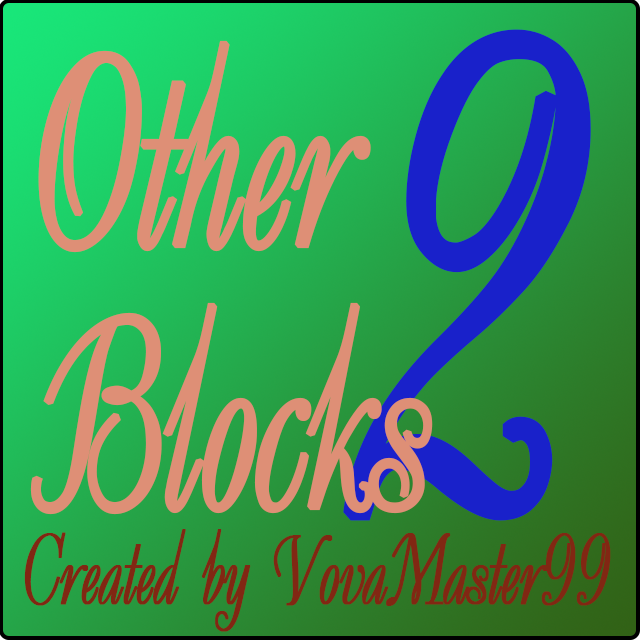
<style>
.page{position:relative;width:640px;height:640px}
.page>*{position:absolute;margin:0}
.t1{font:666.7px "DecorCyrillic";letter-spacing:-0.025em;color:#1921ca;font-weight:bold;scale:0.68 1}
.t2{font:273.3px "DecorCyrillic";letter-spacing:-0.025em;color:#de8f76;font-weight:bold;scale:0.68 1}
.t3{font:100px "DecorCyrillic";letter-spacing:-0.025em;color:#812713;font-weight:bold;scale:0.68 1}
</style>
<div class="page">
<p class="t1" style="left:343px;top:29px;width:248px;height:492px">2</p>
<p class="t2" style="left:30px;top:40px;width:403px;height:475px">Other<br><br>Blocks</p>
<p class="t3" style="left:24px;top:529px;width:587px;height:103px">Created by VovaMaster99</p>
</div>
